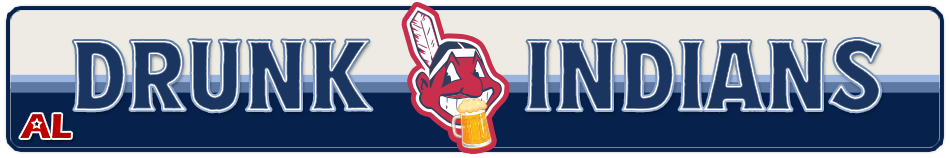
<style>
.page{position:relative;width:950px;height:158px;background:#05214c}
.page>*{position:absolute;margin:0}
.t1{font:85.7px "Espiritu-Regular";color:#1a355f}
</style>
<div class="page">
<p class="t1" style="left:73px;top:39px;width:808px;height:73px">DRUNK      INDIANS</p>
</div>
